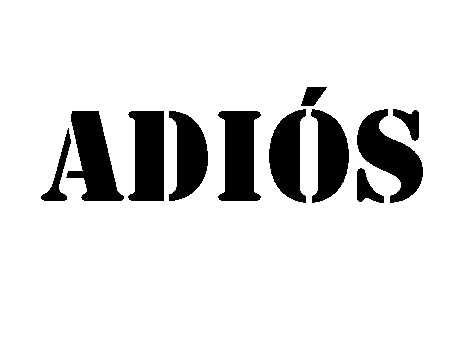
<style>
.page{position:relative;width:454px;height:340px;background:#ffffff}
.page>*{position:absolute;margin:0}
.t1{font:120px "StencilStd";color:#000000}
</style>
<div class="page">
<p class="t1" style="left:41px;top:87px;width:382px;height:116px">ADIÓS</p>
</div>
